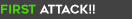
<style>
.page{position:relative;width:132px;height:19px;background:#424242}
.page>*{position:absolute;margin:0}
.t1{font:12.1px "Geometos";color:#ffffff}
.t2{font:12.1px "Geometos";color:#44da01}
</style>
<div class="page">
<p class="t1" style="left:1px;top:4px;width:94px;height:10px"><span class="t2">first</span> attack!!</p>
</div>
